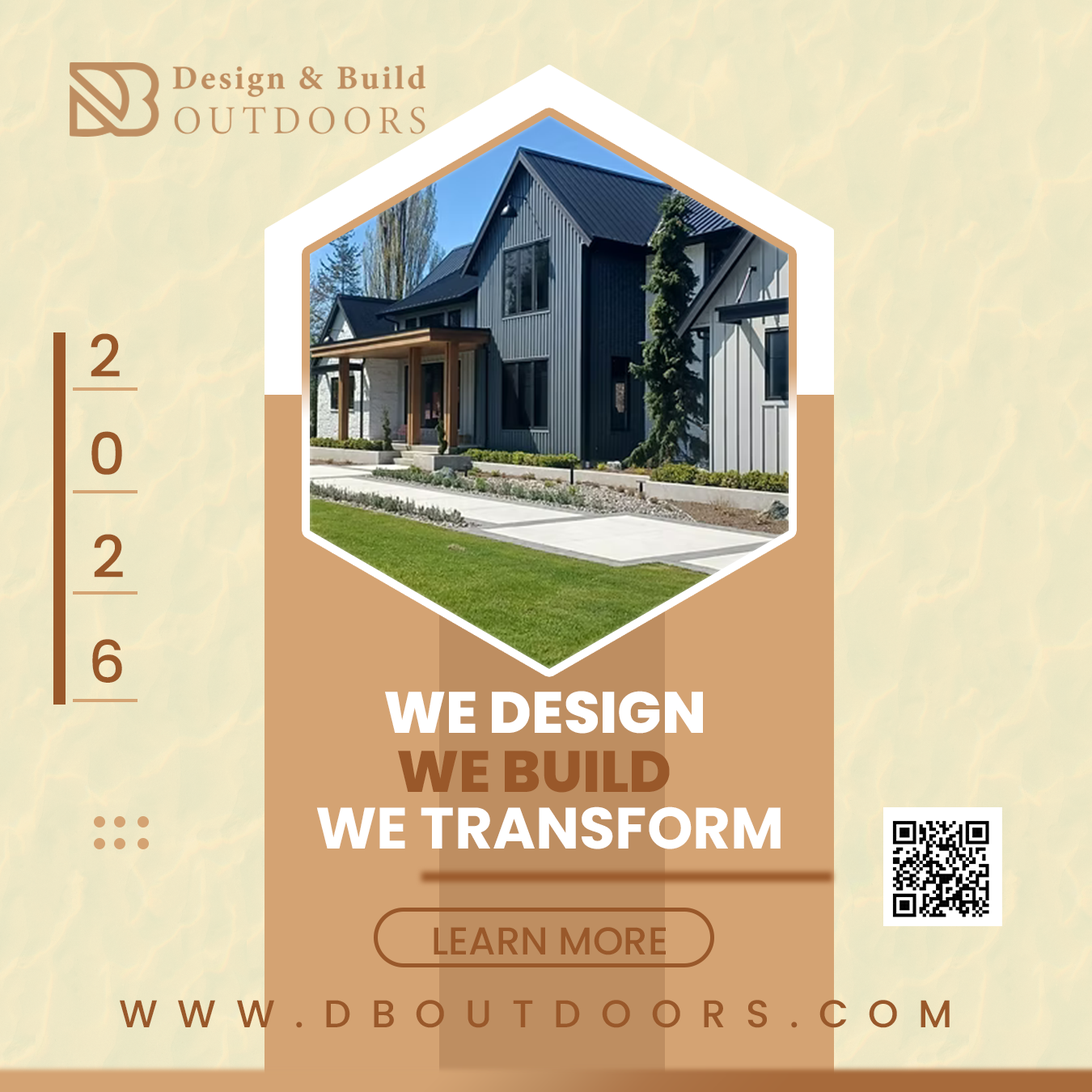
<style>
.page{position:relative;width:1092px;height:1092px}
.page>*{position:absolute;margin:0}
.t1{font:58.2px "Poppins-Medium";color:#99582a;font-variant:small-caps}
.t2{font:58.2px "Poppins-ExtraBold";color:#ffffff;font-variant:small-caps}
.t3{font:58.2px "Poppins-ExtraBold";color:#99582a;font-variant:small-caps}
.t4{font:58.2px "Poppins-Bold";color:#ffffff;font-variant:small-caps}
.t5{font:38.8px "Poppins-Medium";color:#99582a;font-variant:small-caps}
.t6{font:38.8px "Poppins-Medium";letter-spacing:0.51em;color:#99582a;font-variant:small-caps}
</style>
<div class="page">
<p class="t1" style="left:91px;top:333px;width:29px;height:44px">2</p>
<p class="t1" style="left:91px;top:431px;width:31px;height:44px">0</p>
<p class="t1" style="left:94px;top:534px;width:29px;height:44px">2</p>
<p class="t1" style="left:92px;top:639px;width:30px;height:44px">6</p>
<p class="t2" style="left:385px;top:691px;width:318px;height:43px">WE DESIGN</p>
<p class="t3" style="left:398px;top:751px;width:272px;height:42px">WE BUILD</p>
<p class="t4" style="left:316px;top:806px;width:465px;height:43px">WE TRANSFORM</p>
<p class="t5" style="left:434px;top:927px;width:232px;height:28px">LEARN MORE</p>
<p class="t6" style="left:120px;top:1000px;width:830px;height:28px">WWW.DBOUTDOORS.COM</p>
</div>
